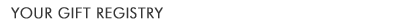
<style>
.page{position:relative;width:400px;height:24px;background:#ffffff}
.page>*{position:absolute;margin:0}
.t1{font:14.7px "FuturaBT-Light";letter-spacing:0.025em;color:#363636;text-transform:uppercase;font-weight:bold}
</style>
<div class="page">
<p class="t1" style="left:11px;top:7px;width:152px;height:12px">your gift registry</p>
</div>
